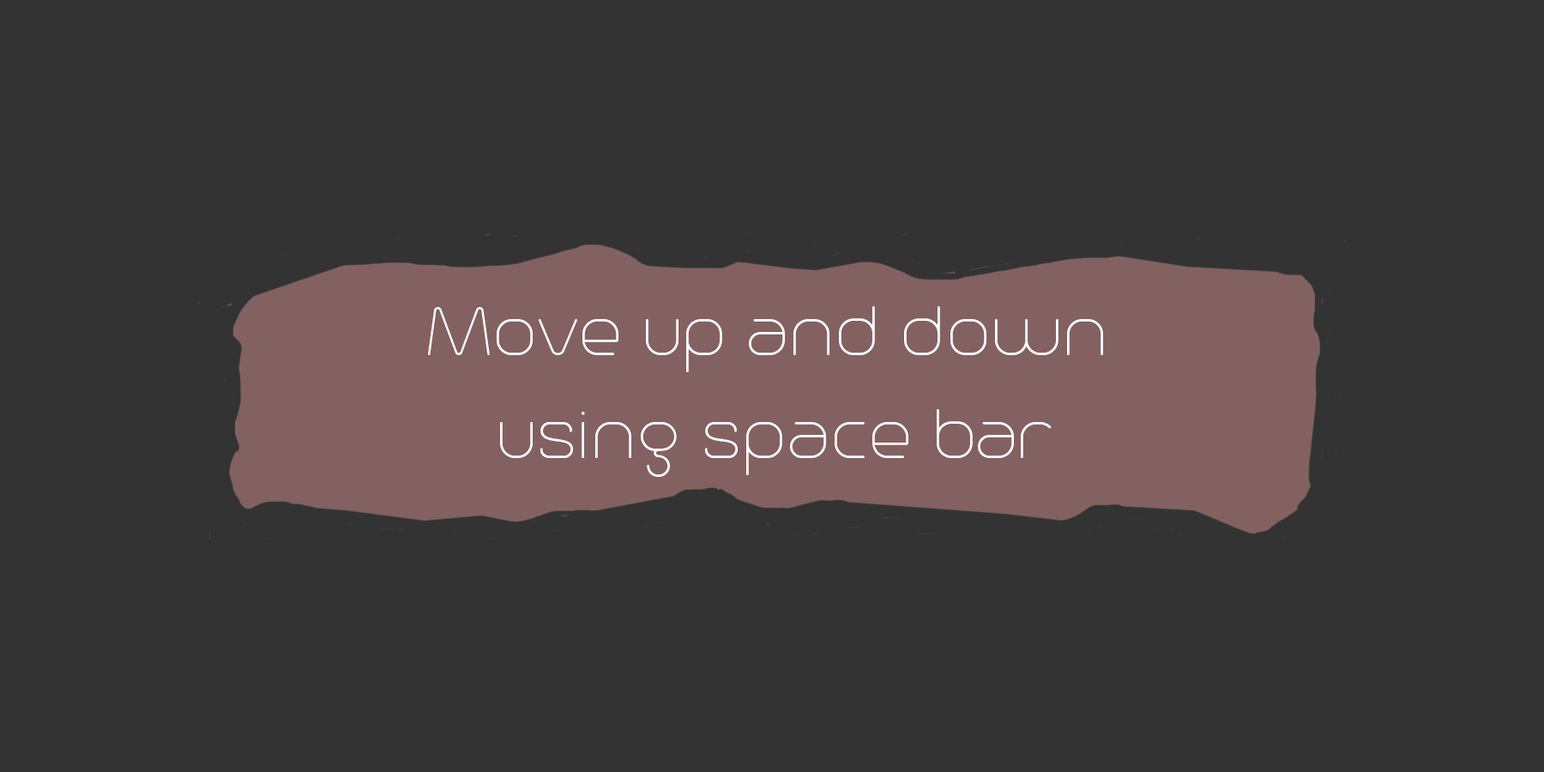
<style>
.page{position:relative;width:1544px;height:772px;background:#333333}
.page>*{position:absolute;margin:0}
.t1{font:85.8px "Trench-Thin";color:#ffffff}
</style>
<div class="page">
<p class="t1" style="left:428px;top:306px;width:675px;height:171px;text-align:center">Move up and down <br>using space bar</p>
</div>
